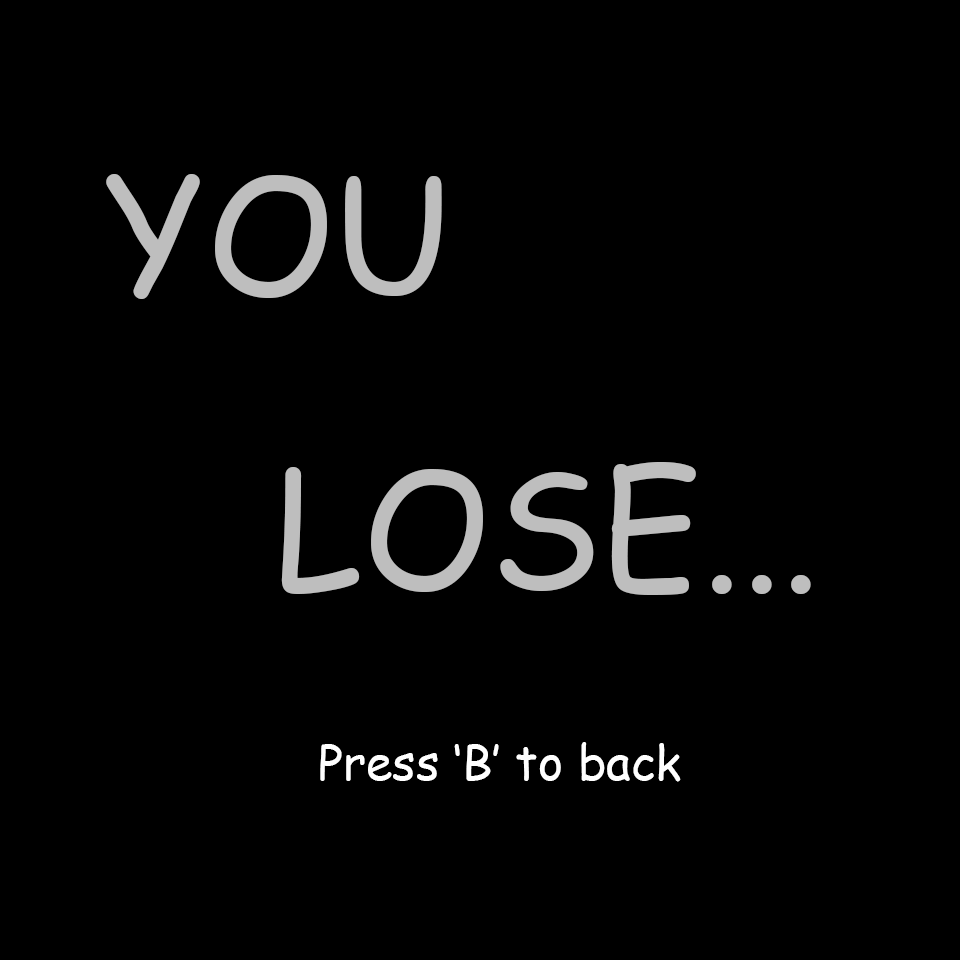
<style>
.page{position:relative;width:960px;height:960px;background:#000000}
.page>*{position:absolute;margin:0}
.t1{font:160px "ComicSansMS";color:#bebebe}
.t2{font:96px "ComicSansMS";color:#d8ff00}
.t3{font:48px "ComicSansMS";color:#ffffff}
</style>
<div class="page">
<p class="t1" style="left:106px;top:174px;width:336px;height:125px"><span class="t2"> <br>   </span>YOU</p>
<p class="t1" style="left:281px;top:462px;width:530px;height:133px">LOSE...</p>
<p class="t3" style="left:320px;top:742px;width:361px;height:40px">Press ‘B’ to back</p>
</div>
